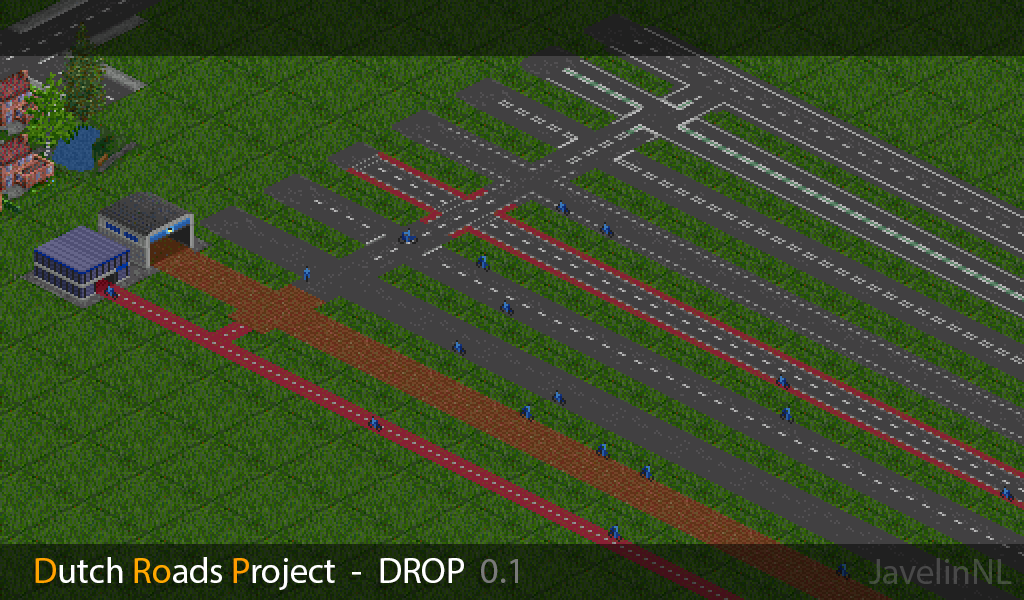
<style>
.page{position:relative;width:1024px;height:600px;background:#414041}
.page>*{position:absolute;margin:0}
.t1{font:36px "MyriadPro-Regular";color:#ffffff}
.t2{font:36px "MyriadPro-Regular";color:#ffa200}
.t3{font:36px "MyriadPro-Regular";color:#ffa800}
.t4{font:36px "MyriadPro-Regular";color:#ff9c00}
.t5{font:36px "MyriadPro-Regular";color:#797979}
.t6{font:36px "MyriadPro-Regular";color:#484848}
</style>
<div class="page">
<p class="t1" style="left:35px;top:557px;width:483px;height:33px"><span class="t2">D</span>utch <span class="t3">Ro</span>ads <span class="t4">P</span>roject  -  DROP  <span class="t5">0.1</span></p>
<p class="t6" style="left:869px;top:558px;width:143px;height:26px">JavelinNL</p>
</div>
